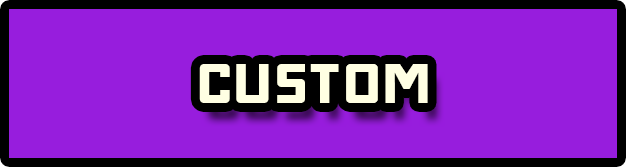
<style>
.page{position:relative;width:626px;height:167px;background:#971ddd}
.page>*{position:absolute;margin:0}
.t1{font:90px "ONRAMP";color:#ffffe3}
</style>
<div class="page">
<p class="t1" style="left:199px;top:64px;width:229px;height:39px">custom</p>
</div>
